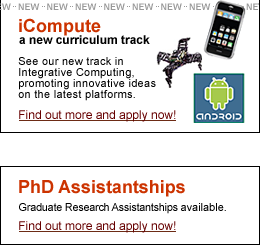
<style>
.page{position:relative;width:260px;height:245px;background:#ffffff}
.page>*{position:absolute;margin:0}
.t1{font:9px "Arial-BoldMT";color:#999999}
.t2{font:9px "Arial-BoldMT";color:#000000}
.t3{font:18px "Arial-BoldMT";color:#cc3300}
.t4{font:12px "Arial-BoldMT";color:#000000}
.t5{font:11px/11px "ArialMT";letter-spacing:0.025em;color:#000000}
.t6{font:12px "ArialMT";color:#660000}
.t7{font:11px "ArialMT";letter-spacing:-0.025em;color:#000000}
.t8{font:11px "ArialMT";color:#000000}
</style>
<div class="page">
<p class="t1" style="left:0px;top:3px;width:260px;height:7px">NEW   NEW   NEW   NEW   NEW   NEW   NEW   NEW   NEW   NE<span class="t2">W</span></p>
<p class="t3" style="left:19px;top:18px;width:82px;height:18px">iCompute</p>
<p class="t4" style="left:19px;top:35px;width:131px;height:9px">a new curriculum track</p>
<p class="t5" style="left:18px;top:57px;width:138px;height:44px">See our new track in <br>Integrative Computing, <br>promoting innovative ideas<br>on the latest platforms.</p>
<p class="t6" style="left:19px;top:110px;width:157px;height:12px">Find out more and apply now!</p>
<p class="t3" style="left:19px;top:180px;width:166px;height:17px">PhD Assistantships</p>
<p class="t7" style="left:19px;top:203px;width:207px;height:11px">Graduate Research Assistantships <span class="t8">available.</span></p>
<p class="t6" style="left:19px;top:221px;width:157px;height:12px">Find out more and apply now!</p>
</div>
